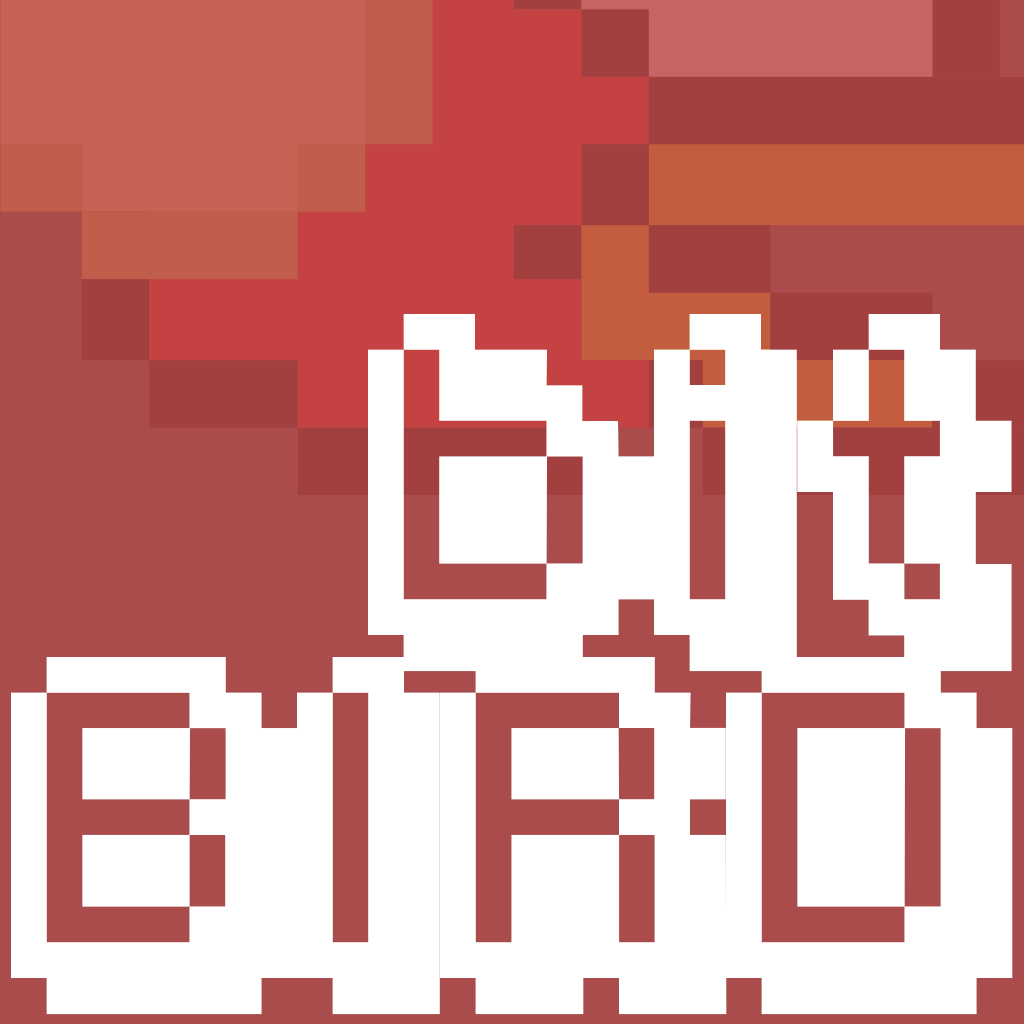
<style>
.page{position:relative;width:1024px;height:1024px;background:#ffffff}
.page>*{position:absolute;margin:0}
.t1{font:286px "Fipps-Regular";color:#ffffff}
</style>
<div class="page">
<p class="t1" style="left:11px;top:314px;width:1002px;height:701px;text-align:right">bit<br>BIRD</p>
</div>
